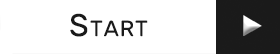
<style>
.page{position:relative;width:280px;height:54px;background:#ffffff}
.page>*{position:absolute;margin:0}
.t1{font:31.4px "Rubik-Regular";letter-spacing:0.05em;color:#1a1a1a;font-variant:small-caps}
</style>
<div class="page">
<p class="t1" style="left:70px;top:13px;width:78px;height:24px">Start</p>
</div>
